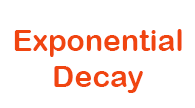
<style>
.page{position:relative;width:195px;height:108px;background:#ffffff}
.page>*{position:absolute;margin:0}
.t1{font:30px "ArialRoundedMTBold";color:#f04510}
</style>
<div class="page">
<p class="t1" style="left:14px;top:29px;width:168px;height:64px;text-align:center">Exponential<br>Decay</p>
</div>
